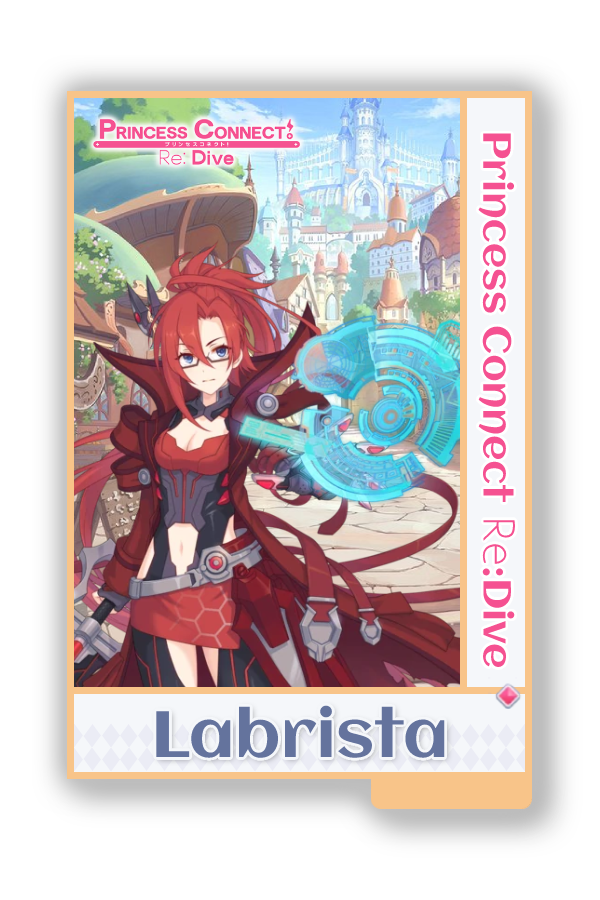
<style>
.page{position:relative;width:600px;height:900px;background:#ffffff}
.page>*{position:absolute;margin:0}
.t1{font:39px "Aclonica-Regular";color:#f55191}
.t2{font:39px "AaarghNormal";color:#f55191}
.t3{font:65px "Aclonica-Regular";color:#64739d}
</style>
<div class="page">
<p class="t1" style="left:478px;top:133px;width:38px;height:534px;rotate:90deg">Princess Connect <span class="t2">Re</span>:Dive</p>
<p class="t3" style="left:156px;top:705px;width:289px;height:53px">Labrista</p>
</div>
